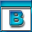
<style>
.page{position:relative;width:32px;height:32px;background:#ffffff}
.page>*{position:absolute;margin:0}
.t1{font:21.1px "Arial-Black"}
</style>
<div class="page">
<p class="t1" style="left:9px;top:10px;width:15px;height:16px">B</p>
</div>
